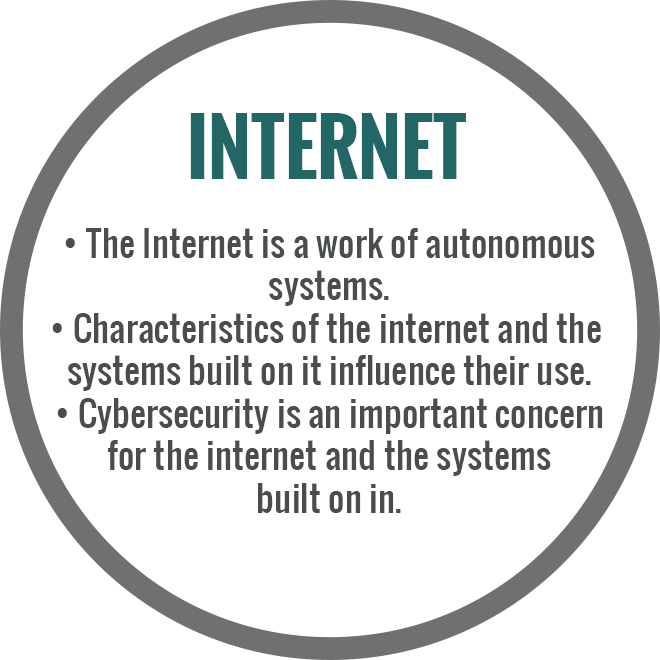
<style>
.page{position:relative;width:660px;height:660px;background:#ffffff}
.page>*{position:absolute;margin:0}
.t1{font:75px "Oswald-Bold";color:#236666}
.t2{font:35.4px "Oswald-Regular";color:#494d4c}
</style>
<div class="page">
<p class="t1" style="left:190px;top:113px;width:276px;height:66px">INTERNET</p>
<p class="t2" style="left:52px;top:228px;width:551px;height:285px;text-align:center">• The Internet is a work of autonomous<br>systems.<br>• Characteristics of the internet and the <br>systems built on it influence their use.<br>• Cybersecurity is an important concern<br>for the internet and the systems<br>built on in.</p>
</div>
